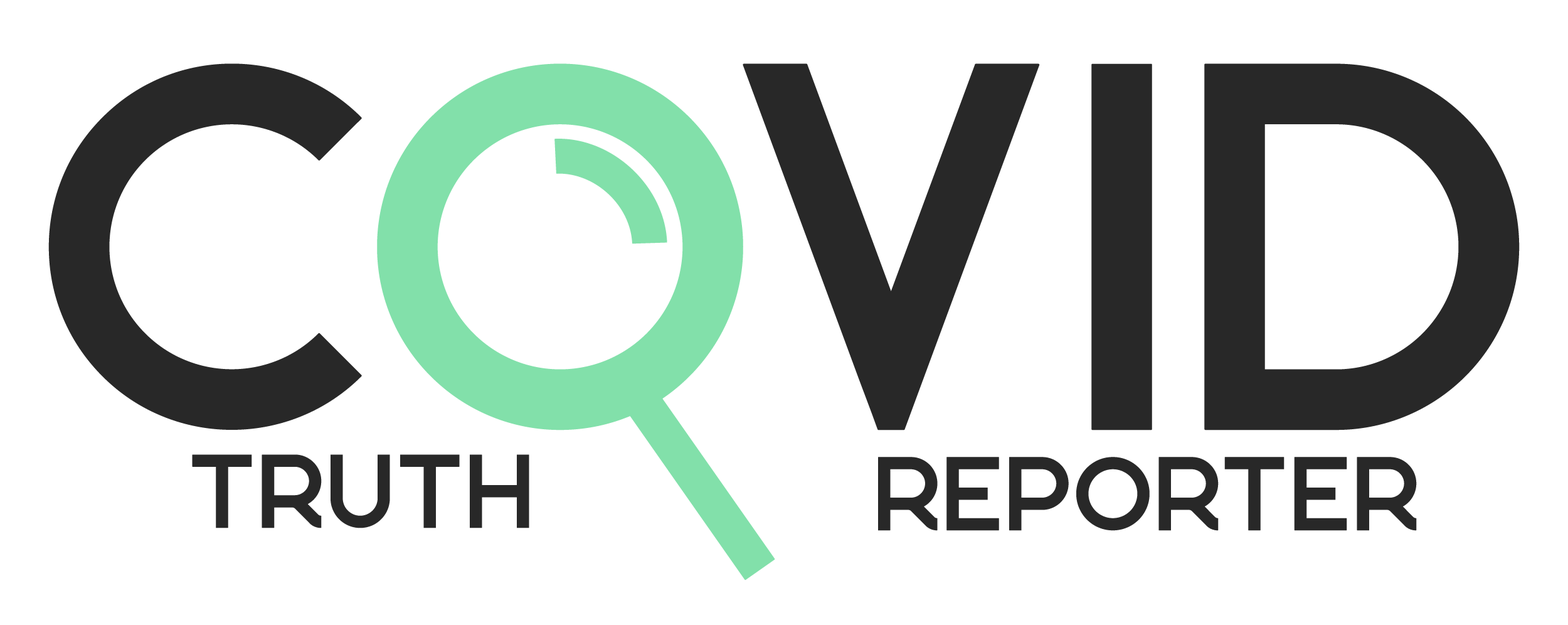
<style>
.page{position:relative;width:1568px;height:625px;background:#ffffff}
.page>*{position:absolute;margin:0}
.t1{font:522.7px "BronxRegular";color:#282828}
.t2{font:522.7px "BronxRegular";color:#82e0aa}
.t3{font:48.8px "BronxRegular";color:#82e0aa;scale:12.5 1}
.t4{font:314.9px "BronxRegular";color:#82e0aa}
.t5{font:104.5px "BronxRegular";color:#282828}
</style>
<div class="page">
<p class="t1" style="left:48px;top:63px;width:1472px;height:367px">C<span class="t2">o</span>vid</p>
<p class="t3" style="left:554px;top:139px;width:113px;height:105px;rotate:43deg">i</p>
<p class="t4" style="left:618px;top:378px;width:157px;height:202px;rotate:-35deg">i</p>
<p class="t5" style="left:192px;top:454px;width:337px;height:74px">truth</p>
<p class="t5" style="left:878px;top:457px;width:539px;height:74px">reporter</p>
</div>
